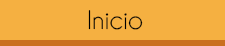
<style>
.page{position:relative;width:225px;height:46px;background:#f5b041}
.page>*{position:absolute;margin:0}
.t1{font:24px "CaviarDreams";color:#000000}
</style>
<div class="page">
<p class="t1" style="left:88px;top:10px;width:55px;height:20px">Inicio</p>
</div>
